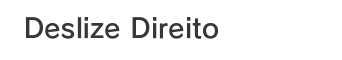
<style>
.page{position:relative;width:342px;height:60px;background:#ffffff}
.page>*{position:absolute;margin:0}
.t1{font:26.7px "RodinPro-DB";letter-spacing:0.008em;color:#383738}
</style>
<div class="page">
<p class="t1" style="left:26px;top:17px;width:192px;height:22px">Deslize Direito</p>
</div>
